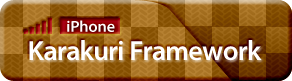
<style>
.page{position:relative;width:292px;height:81px}
.page>*{position:absolute;margin:0}
.t1{font:16px "MyriadPro-Semibold";color:#ffffff}
.t2{font:28px "MyriadPro-Semibold";color:#ffffff}
</style>
<div class="page">
<p class="t1" style="left:67px;top:20px;width:48px;height:12px">iPhone</p>
<p class="t2" style="left:29px;top:40px;width:233px;height:21px">Karakuri Framework</p>
</div>
